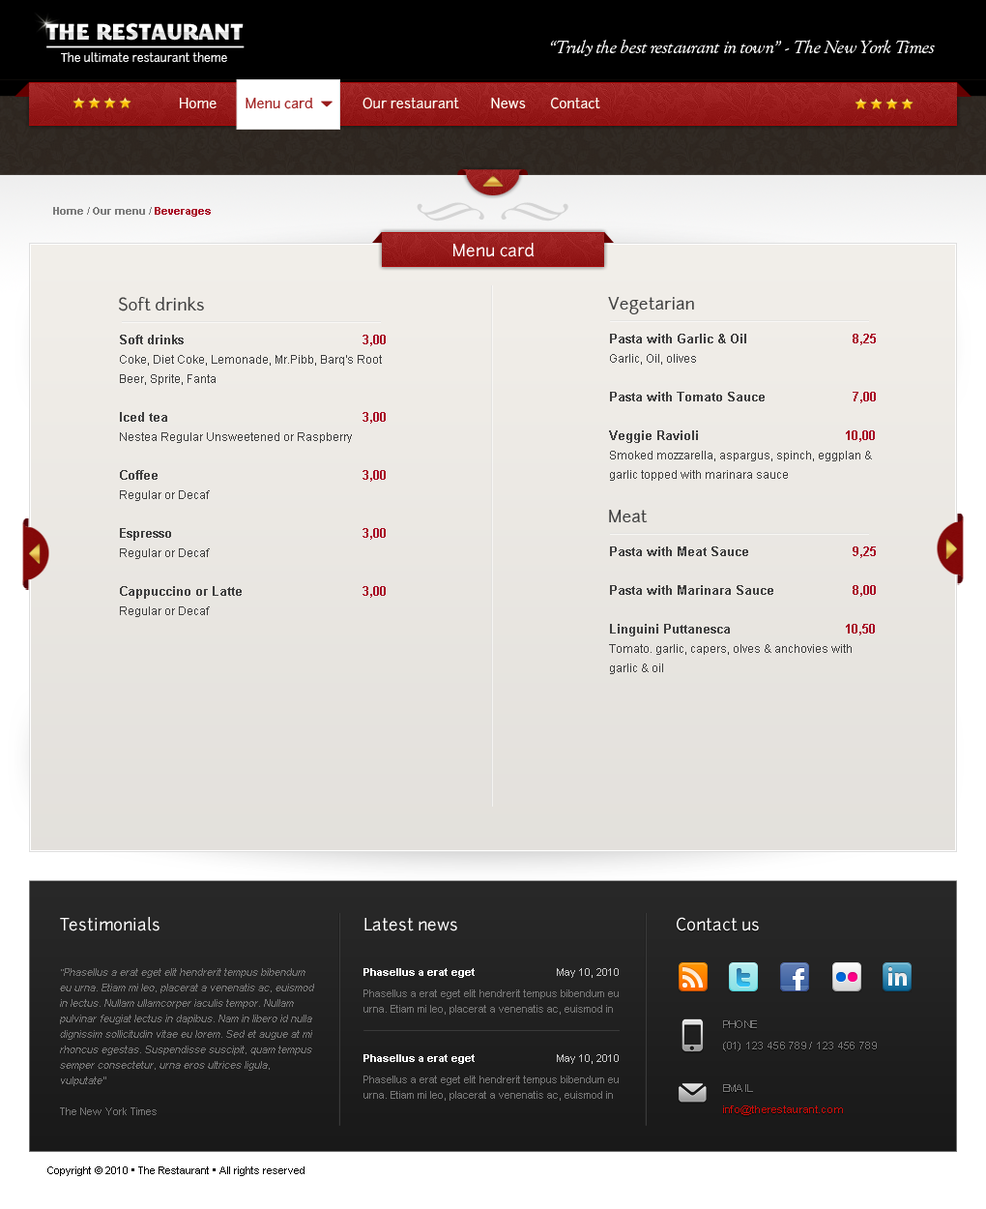
<style>
.page{position:relative;width:986px;height:1209px}
.page>*{position:absolute;margin:0}
.t1{font:22.7px "MEgalopolisExtra";color:#ffffff}
.t2{font:17.4px "OFLGoudyStM-Italic";color:#ffffff;font-style:italic}
.t3{font:11.4px "Junction";color:#ffffff}
.t4{font:13.5px "Junction";color:#fffff5}
.t5{font:13.5px "Junction";color:#a32727}
.t6{font:10.6px "Arial-BoldMT";color:#7c7c7c}
.t7{font:10.6px "Arial-BoldMT";color:#a80b24}
.t8{font:16.4px "Junction";color:#fffefe}
.t9{font:16.8px "Junction";color:#3f3f3f}
.t10{font:11.8px/19.3px "ArialMT";color:#3e3e3e}
.t11{font:12.8px/19.3px "Arial-BoldMT";color:#3e3e3e}
.t12{font:12.8px/19.3px "Arial-BoldMT";color:#a80b24}
.t13{font:10.6px/15.5px "ArialMT";color:#777777;font-style:italic}
.t14{font:10.6px/15.5px "ArialMT";color:#777777}
.t15{font:10.6px "Arial-BoldMT";color:#ffffff}
.t16{font:10.6px "ArialMT";color:#cacaca}
.t17{font:10.6px/21.3px "ArialMT";color:#777777;scale:1.1 1}
.t18{font:10.6px/21.3px "ArialMT";color:#cd0e0a;scale:1.1 1}
.t19{font:10.6px "ArialMT";color:#000000}
</style>
<div class="page">
<p class="t1" style="left:45px;top:23px;width:199px;height:18px">THE RESTAURANT</p>
<p class="t2" style="left:550px;top:39px;width:385px;height:17px">“Truly the best restaurant in town” - The New York Times</p>
<p class="t3" style="left:61px;top:52px;width:166px;height:10px">The ultimate restaurant theme</p>
<p class="t4" style="left:180px;top:97px;width:421px;height:12px">Home        Menu card              Our restaurant         News       Contact</p>
<p class="t5" style="left:246px;top:98px;width:67px;height:11px">Menu card</p>
<p class="t6" style="left:53px;top:207px;width:158px;height:10px">Home / Our menu / <span class="t7">Beverages</span></p>
<p class="t8" style="left:454px;top:243px;width:81px;height:14px">Menu card</p>
<p class="t9" style="left:119px;top:297px;width:85px;height:14px">Soft drinks</p>
<p class="t9" style="left:608px;top:297px;width:86px;height:17px">Vegetarian</p>
<p class="t10" style="left:120px;top:335px;width:266px;height:282px"><span class="t11">Soft drinks       </span><span class="t12">3,00<br></span>Coke, Diet Coke, Lemonade, Mr.Pibb, Barq's Root Beer, Sprite, Fanta<br><br><span class="t11">Iced tea       </span><span class="t12">3,00<br></span>Nestea Regular Unsweetened or Raspberry<br><br><span class="t11">Coffee       </span><span class="t12">3,00<br></span>Regular or Decaf<br><br><span class="t11">Espresso       </span><span class="t12">3,00<br></span>Regular or Decaf<br><br><span class="t11">Cappuccino or Latte     </span><span class="t12">3,00<br></span>Regular or Decaf</p>
<p class="t10" style="left:609px;top:334px;width:267px;height:147px"><span class="t11">Pasta with Garlic &amp; Oil    </span><span class="t12">8,25<br></span>Garlic, Oil, olives<br><br><span class="t11">Pasta with Tomato Sauce   </span><span class="t12">7,00<br><br></span><span class="t11">Veggie Ravioli           </span><span class="t12">10,00<br></span>Smoked mozzarella, aspargus, spinch, eggplan &amp; garlic topped with marinara sauce</p>
<p class="t9" style="left:609px;top:510px;width:39px;height:12px">Meat</p>
<p class="t10" style="left:609px;top:546px;width:267px;height:128px"><span class="t11">Pasta with Meat Sauce   </span><span class="t12">9,25<br><br></span><span class="t11">Pasta with Marinara Sauce   </span><span class="t12">8,00<br><br></span><span class="t11">Linguini Puttanesca          </span><span class="t12">10,50<br></span>Tomato. garlic, capers, olves &amp; anchovies with garlic &amp; oil</p>
<p class="t8" style="left:60px;top:917px;width:100px;height:14px">Testimonials</p>
<p class="t8" style="left:365px;top:918px;width:92px;height:13px">Latest news</p>
<p class="t8" style="left:677px;top:917px;width:82px;height:14px">Contact us</p>
<p class="t13" style="left:60px;top:968px;width:254px;height:147px">“Phasellus a erat eget elit hendrerit tempus bibendum eu urna. Etiam mi leo, placerat a venenatis ac, euismod in lectus. Nullam ullamcorper iaculis tempor. Nullam pulvinar feugiat lectus in dapibus. Nam in libero id nulla dignissim sollicitudin vitae eu lorem. Sed et augue at mi rhoncus egestas. Suspendisse suscipit, quam tempus semper consectetur, urna eros ultrices ligula, vulputate”<span class="t14"> <br><br>The New York Times</span></p>
<p class="t15" style="left:364px;top:968px;width:255px;height:10px">Phasellus a erat eget                            <span class="t16">May 10, 2010</span></p>
<p class="t14" style="left:364px;top:989px;width:255px;height:25px">Phasellus a erat eget elit hendrerit tempus bibendum eu urna. Etiam mi leo, placerat a venenatis ac, euismod in</p>
<p class="t17" style="left:723px;top:1020px;width:154px;height:95px">PHONE<br>(01) 123 456 789 / 123 456 789<br><br>EMAIL<br><span class="t18">info@therestaurant.com</span></p>
<p class="t15" style="left:364px;top:1054px;width:255px;height:10px">Phasellus a erat eget                            <span class="t16">May 10, 2010</span></p>
<p class="t14" style="left:364px;top:1075px;width:255px;height:26px">Phasellus a erat eget elit hendrerit tempus bibendum eu urna. Etiam mi leo, placerat a venenatis ac, euismod in</p>
<p class="t19" style="left:47px;top:1166px;width:258px;height:10px">Copyright © 2010 • The Restaurant • All rights reserved</p>
</div>
